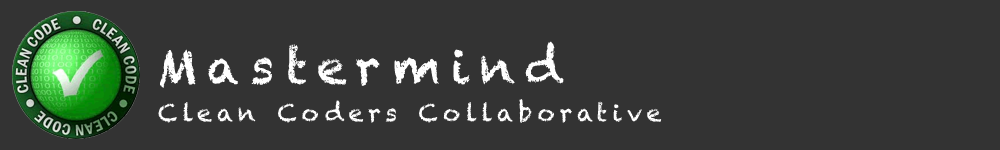
<style>
.page{position:relative;width:1000px;height:150px;background:#333333}
.page>*{position:absolute;margin:0}
.t1{font:48px "Chalkduster";letter-spacing:0.2em;color:#ffffff}
.t2{font:24px "Chalkduster";letter-spacing:0.2em;color:#ffffff}
</style>
<div class="page">
<p class="t1" style="left:160px;top:41px;width:404px;height:47px">Mastermind</p>
<p class="t2" style="left:158px;top:99px;width:504px;height:24px">Clean Coders Collaborative</p>
</div>
